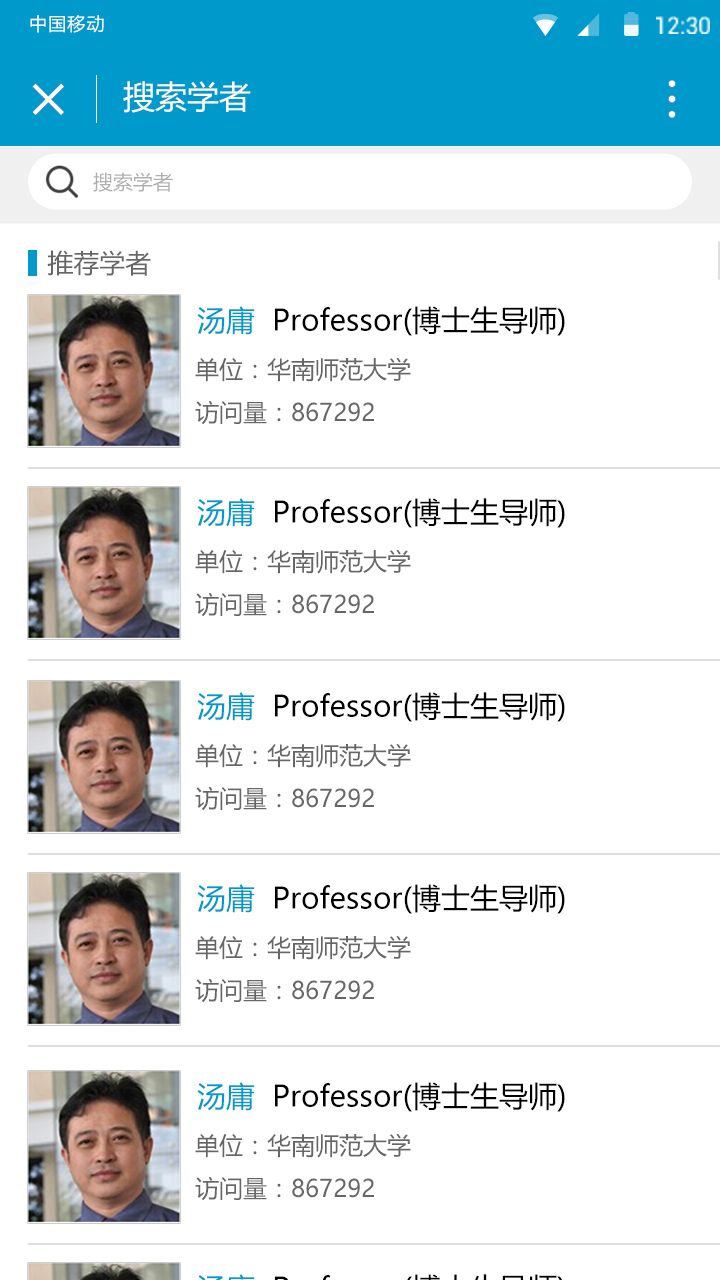
<style>
.page{position:relative;width:720px;height:1280px;background:#ffffff}
.page>*{position:absolute;margin:0}
.t1{font:17.9px "MicrosoftYaHei";letter-spacing:0.065em;color:#ffffff}
.t2{font:32px "MicrosoftYaHei";color:#fefdf8}
.t3{font:19.8px "MicrosoftYaHei";color:#afafaf}
.t4{font:26px "MicrosoftYaHei";color:#666666}
.t5{font:29px "MicrosoftYaHei";color:#000000}
.t6{font:29px "MicrosoftYaHei";color:#0099cc}
.t7{font:24px/43px "MicrosoftYaHei";color:#666666}
</style>
<div class="page">
<p class="t1" style="left:30px;top:15px;width:74px;height:18px">中国移动</p>
<p class="t2" style="left:123px;top:81px;width:128px;height:32px">搜索学者</p>
<p class="t3" style="left:93px;top:172px;width:80px;height:20px">搜索学者</p>
<p class="t4" style="left:47px;top:250px;width:104px;height:26px">推荐学者</p>
<p class="t5" style="left:197px;top:306px;width:368px;height:30px"><span class="t6">汤庸  </span>Professor(博士生导师)</p>
<p class="t7" style="left:195px;top:357px;width:216px;height:68px">单位：华南师范大学               <br>访问量：867292</p>
<p class="t5" style="left:197px;top:498px;width:368px;height:30px"><span class="t6">汤庸  </span>Professor(博士生导师)</p>
<p class="t7" style="left:195px;top:549px;width:216px;height:68px">单位：华南师范大学               <br>访问量：867292</p>
<p class="t5" style="left:197px;top:692px;width:368px;height:30px"><span class="t6">汤庸  </span>Professor(博士生导师)</p>
<p class="t7" style="left:195px;top:743px;width:216px;height:68px">单位：华南师范大学               <br>访问量：867292</p>
<p class="t5" style="left:197px;top:884px;width:368px;height:30px"><span class="t6">汤庸  </span>Professor(博士生导师)</p>
<p class="t7" style="left:195px;top:935px;width:216px;height:68px">单位：华南师范大学               <br>访问量：867292</p>
<p class="t5" style="left:197px;top:1082px;width:368px;height:30px"><span class="t6">汤庸  </span>Professor(博士生导师)</p>
<p class="t7" style="left:195px;top:1133px;width:216px;height:68px">单位：华南师范大学               <br>访问量：867292</p>
</div>
